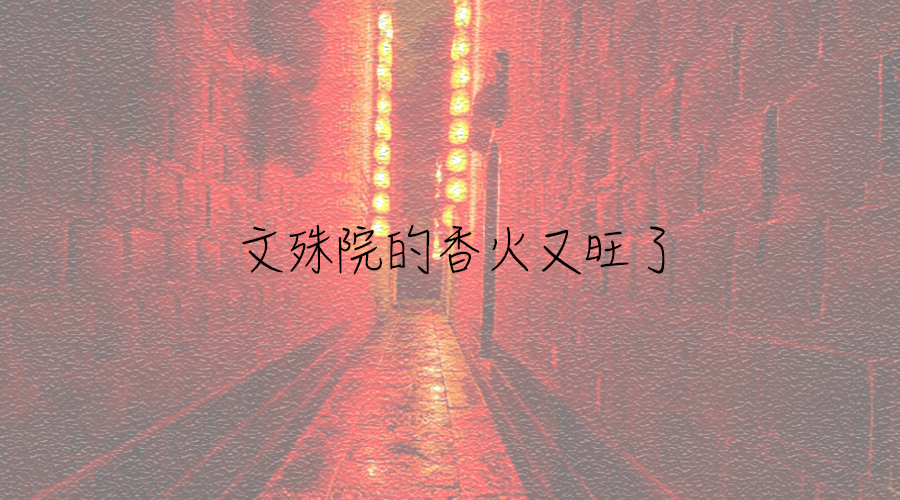
<style>
.page{position:relative;width:900px;height:500px}
.page>*{position:absolute;margin:0}
.t1{font:48px "HanziPenSC-W3";color:#000000}
</style>
<div class="page">
<p class="t1" style="left:242px;top:224px;width:423px;height:51px">文殊院的香火又旺了</p>
</div>
